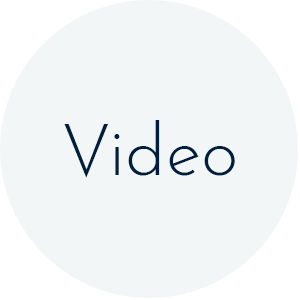
<style>
.page{position:relative;width:300px;height:300px;background:#f3f6f7}
.page>*{position:absolute;margin:0}
.t1{font:72px "JosefinSans-Light";color:#001e3d}
</style>
<div class="page">
<p class="t1" style="left:64px;top:120px;width:171px;height:58px">Video</p>
</div>
